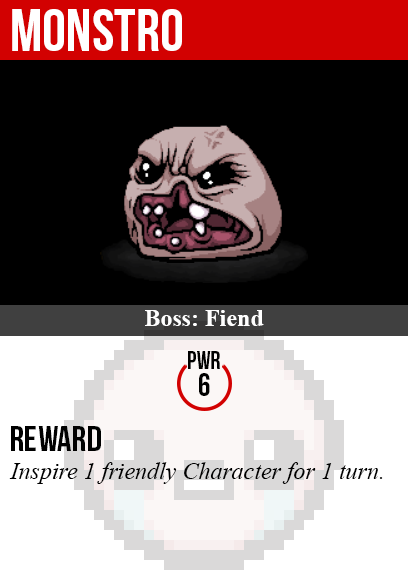
<style>
.page{position:relative;width:408px;height:585px;background:#000000}
.page>*{position:absolute;margin:0}
.t1{font:60px "BebasNeue";color:#ffffff}
.t2{font:24px "TimesNewRomanPS-BoldMT";color:#ffffff}
.t3{font:25px "BebasNeue";color:#000000}
.t4{font:32px "BebasNeue";color:#000000}
.t5{font:36px "BebasNeue";color:#000000}
.t6{font:24px "TimesNewRomanPS-ItalicMT";color:#000000}
</style>
<div class="page">
<p class="t1" style="left:12px;top:9px;width:170px;height:42px">monstro</p>
<p class="t2" style="left:145px;top:310px;width:119px;height:16px">Boss: Fiend</p>
<p class="t3" style="left:188px;top:351px;width:32px;height:18px">pwr</p>
<p class="t4" style="left:199px;top:373px;width:11px;height:23px">6</p>
<p class="t5" style="left:11px;top:426px;width:90px;height:25px">reward</p>
<p class="t6" style="left:9px;top:462px;width:374px;height:22px">Inspire 1 friendly Character for 1 turn.</p>
</div>
